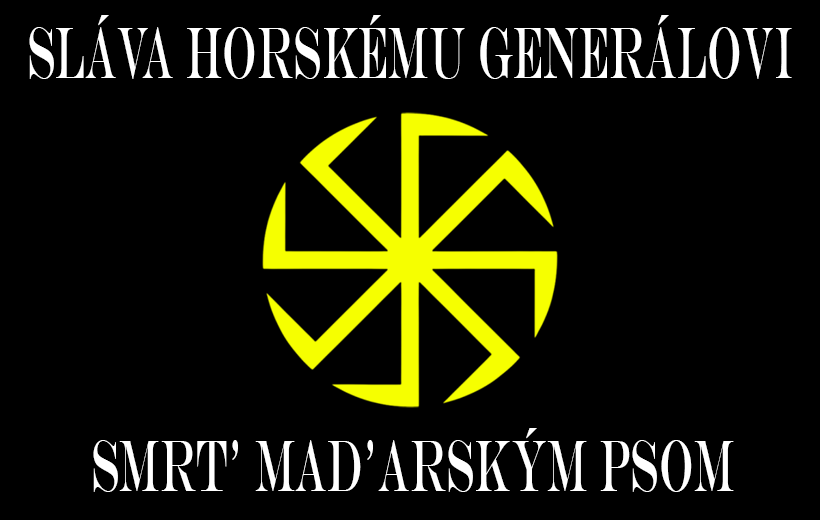
<style>
.page{position:relative;width:820px;height:520px;background:#000000}
.page>*{position:absolute;margin:0}
.t1{font:74.5px "EngraversMT";color:#ffffff;scale:0.49 1}
</style>
<div class="page">
<p class="t1" style="left:29px;top:15px;width:763px;height:64px">Sláva Horskému generálovi</p>
<p class="t1" style="left:93px;top:428px;width:641px;height:64px">Smrt’ Mad’arským psom</p>
</div>
